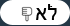
<style>
.page{position:relative;width:70px;height:26px;background:#ffffff}
.page>*{position:absolute;margin:0}
.t1{font:22px "ArialMT";color:#000000}
</style>
<div class="page">
<p class="t1" style="left:36px;top:4px;width:21px;height:16px">אֹל</p>
</div>
